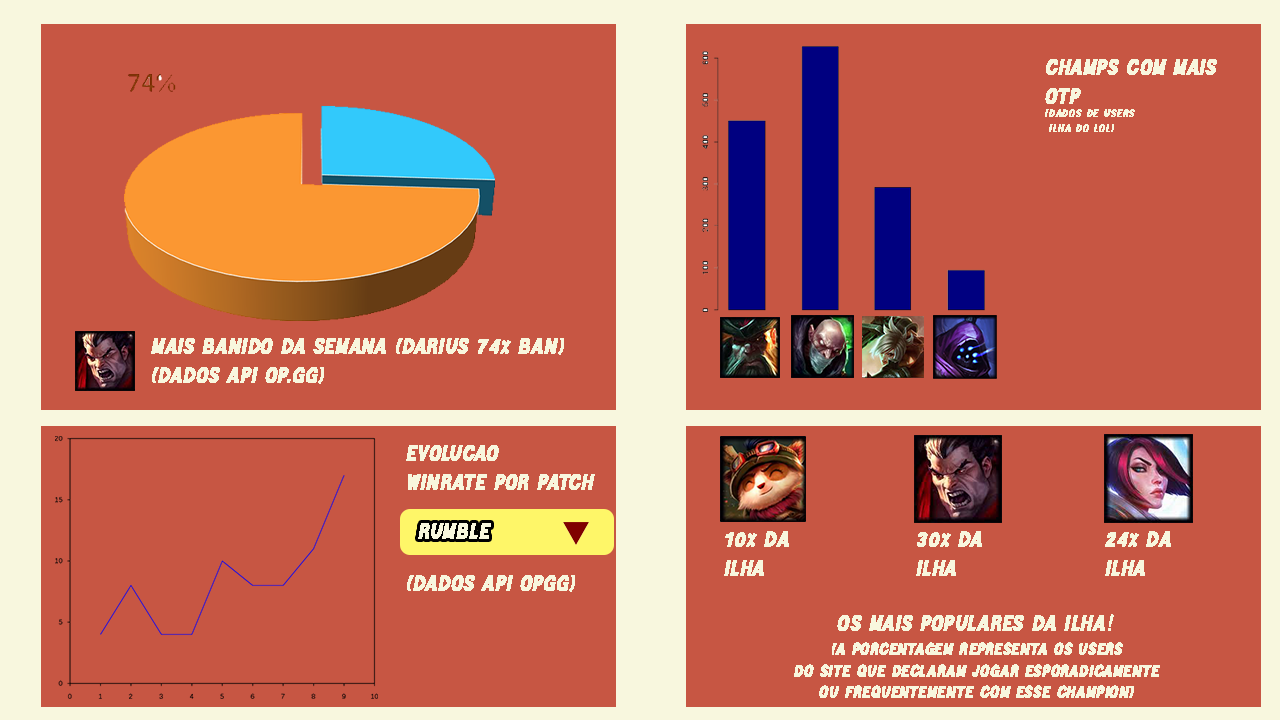
<style>
.page{position:relative;width:1280px;height:720px;background:#c75643}
.page>*{position:absolute;margin:0}
.t1{font:12px "HETIKADemoRegular";color:#f8f7de;font-weight:bold;font-style:italic}
.t2{font:24px "HETIKADemoRegular";color:#f8f7de;font-weight:bold;font-style:italic}
.t3{font:24px "TimesNewRomanPSMT";color:#f8f7de;font-weight:bold;font-style:italic}
.t4{font:18px "HETIKADemoRegular";color:#f8f7de;font-weight:bold;font-style:italic}
</style>
<div class="page">
<p class="t1" style="left:1045px;top:59px;width:172px;height:73px"><span class="t2">champs com mais <br>otp<br></span>(dados de users<br> ilha do lol)</p>
<p class="t2" style="left:151px;top:338px;width:413px;height:46px">mais banido da semana (darius 74% ban)<br>(dados api op.gg)</p>
<p class="t2" style="left:406px;top:445px;width:189px;height:45px">evoluçao<br>winrate por patch</p>
<p class="t2" style="left:418px;top:523px;width:73px;height:16px">RUMBLE</p>
<p class="t2" style="left:724px;top:531px;width:65px;height:45px">10% da<br>ilha</p>
<p class="t2" style="left:916px;top:531px;width:66px;height:45px">30% da<br>ilha</p>
<p class="t2" style="left:1105px;top:531px;width:66px;height:45px">24% da<br>ilha</p>
<p class="t2" style="left:407px;top:575px;width:168px;height:17px">(dados api opgg)</p>
<p class="t2" style="left:837px;top:614px;width:277px;height:17px">os mais populares da ilha<span class="t3">!</span></p>
<p class="t4" style="left:794px;top:642px;width:366px;height:56px;text-align:center">(a porcentagem representa os users<br>do site que declaram jogar esporadicamente<br>ou frequentemente com esse champion)</p>
</div>
